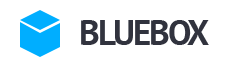
<style>
.page{position:relative;width:228px;height:67px;background:#ffffff}
.page>*{position:absolute;margin:0}
.t1{font:35px "PTSans-Bold";letter-spacing:-0.06em;color:#31333e}
</style>
<div class="page">
<p class="t1" style="left:81px;top:20px;width:128px;height:25px">BLUEBOX</p>
</div>
